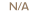
<style>
.page{position:relative;width:38px;height:15px;background:#ffffff}
.page>*{position:absolute;margin:0}
.t1{font:10px "GothicMB101Pro-DeBold";letter-spacing:-0.04em;color:#8b6e51}
</style>
<div class="page">
<p class="t1" style="left:9px;top:2px;width:20px;height:9px;opacity:0.9">N/A</p>
</div>
